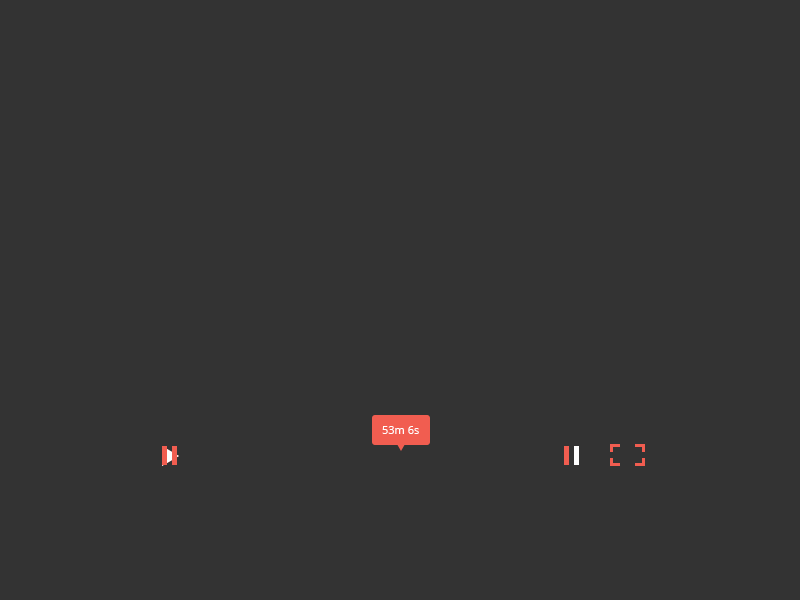
<style>
.page{position:relative;width:800px;height:600px;background:#333333}
.page>*{position:absolute;margin:0}
.t1{font:11px "OpenSans";color:#ffffff}
</style>
<div class="page">
<p class="t1" style="left:382px;top:426px;width:37px;height:8px">53m 6s</p>
</div>
